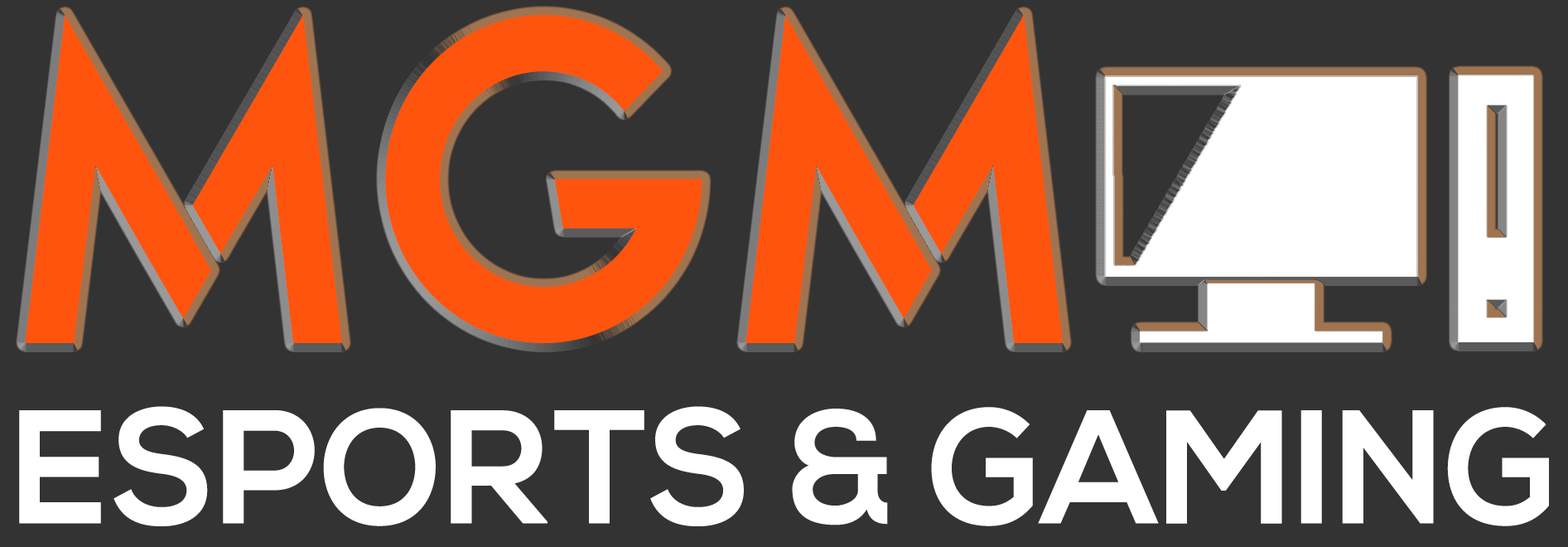
<style>
.page{position:relative;width:1568px;height:547px;background:#333333}
.page>*{position:absolute;margin:0}
.t1{font:447.5px "Elianto-Regular";letter-spacing:0.001em;color:#ff540d;text-transform:uppercase;scale:0.97 1}
.t2{font:161.2px "NexaBold";letter-spacing:0.001em;color:#ffffff;text-transform:uppercase;scale:0.97 1}
</style>
<div class="page">
<p class="t1" style="left:25px;top:15px;width:1038px;height:328px">MGM</p>
<p class="t2" style="left:19px;top:406px;width:1530px;height:120px">Esports &amp; Gaming</p>
</div>
